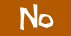
<style>
.page{position:relative;width:71px;height:36px;background:#b35a00}
.page>*{position:absolute;margin:0}
.t1{font:40px "Screwball";color:#ffffff}
</style>
<div class="page">
<p class="t1" style="left:19px;top:4px;width:35px;height:26px">No</p>
</div>
